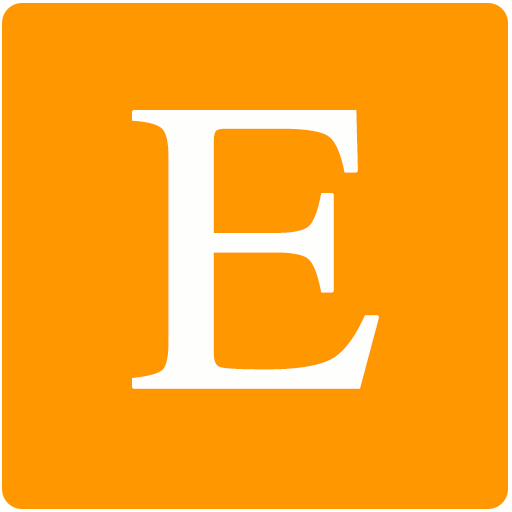
<style>
.page{position:relative;width:512px;height:512px;background:#ff9800}
.page>*{position:absolute;margin:0}
.t1{font:416.7px "Times-Roman";letter-spacing:-0.04em;color:#fefefd;font-weight:bold}
</style>
<div class="page">
<p class="t1" style="left:132px;top:110px;width:247px;height:279px">E</p>
</div>
